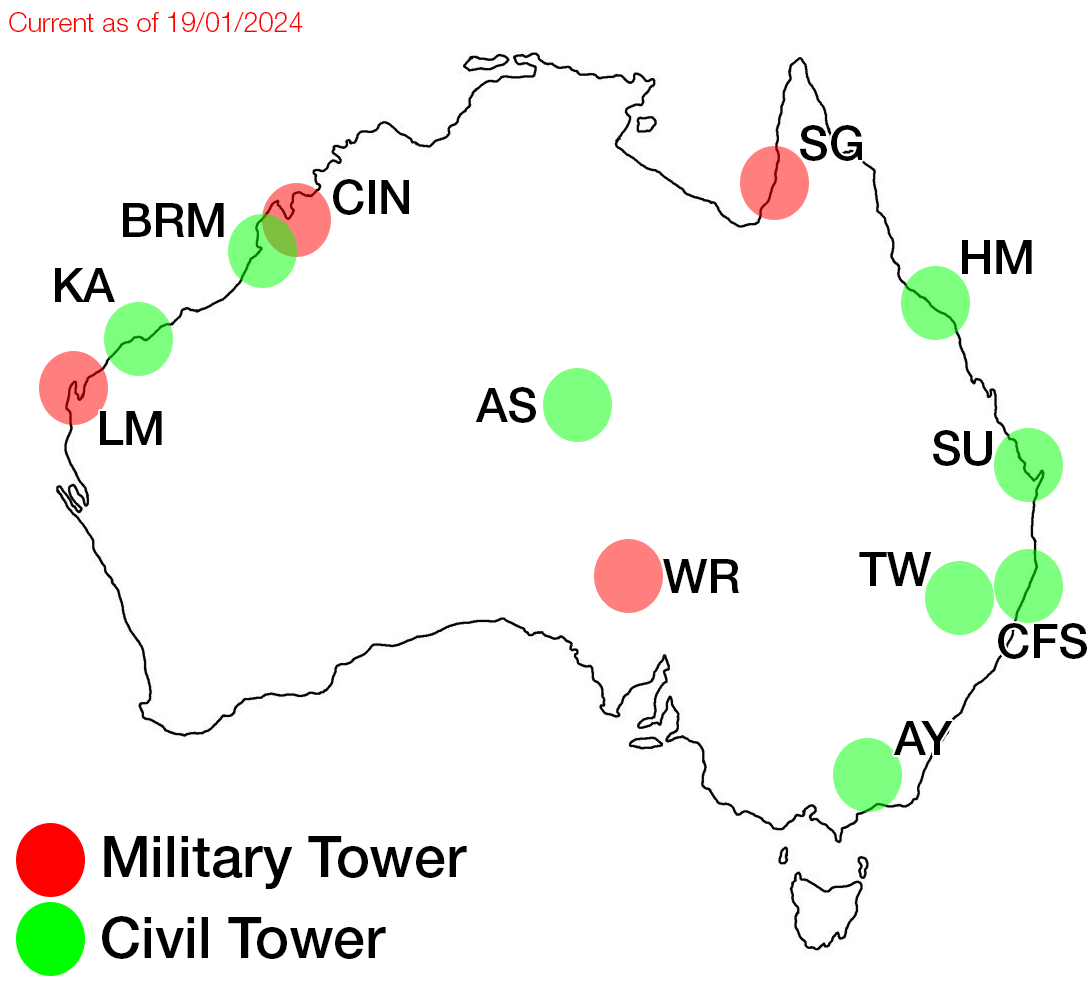
<style>
.page{position:relative;width:1091px;height:994px;background:#ffffff}
.page>*{position:absolute;margin:0}
.t1{font:26.9px "HelveticaNeueLTStd-Lt";color:#ff0000}
.t2{font:47.4px "HelveticaNeueLTStd-Md";color:#000000}
.t3{font:57.1px "HelveticaNeueLTStd-Md";color:#000000}
</style>
<div class="page">
<p class="t1" style="left:9px;top:12px;width:294px;height:20px">Current as of 19/01/2024</p>
<p class="t2" style="left:800px;top:125px;width:62px;height:36px">SG</p>
<p class="t2" style="left:333px;top:179px;width:76px;height:36px">CIN</p>
<p class="t2" style="left:123px;top:203px;width:101px;height:34px">BRM</p>
<p class="t2" style="left:962px;top:240px;width:70px;height:34px">HM</p>
<p class="t2" style="left:55px;top:268px;width:60px;height:34px">KA</p>
<p class="t2" style="left:475px;top:387px;width:61px;height:36px">AS</p>
<p class="t2" style="left:100px;top:411px;width:62px;height:34px">LM</p>
<p class="t2" style="left:933px;top:430px;width:59px;height:36px">SU</p>
<p class="t2" style="left:859px;top:552px;width:73px;height:34px">TW</p>
<p class="t2" style="left:663px;top:559px;width:77px;height:34px">WR</p>
<p class="t2" style="left:998px;top:623px;width:89px;height:36px">CFS</p>
<p class="t2" style="left:893px;top:721px;width:60px;height:34px">AY</p>
<p class="t3" style="left:104px;top:836px;width:363px;height:53px">Military Tower</p>
<p class="t3" style="left:102px;top:916px;width:284px;height:43px">Civil Tower</p>
</div>
